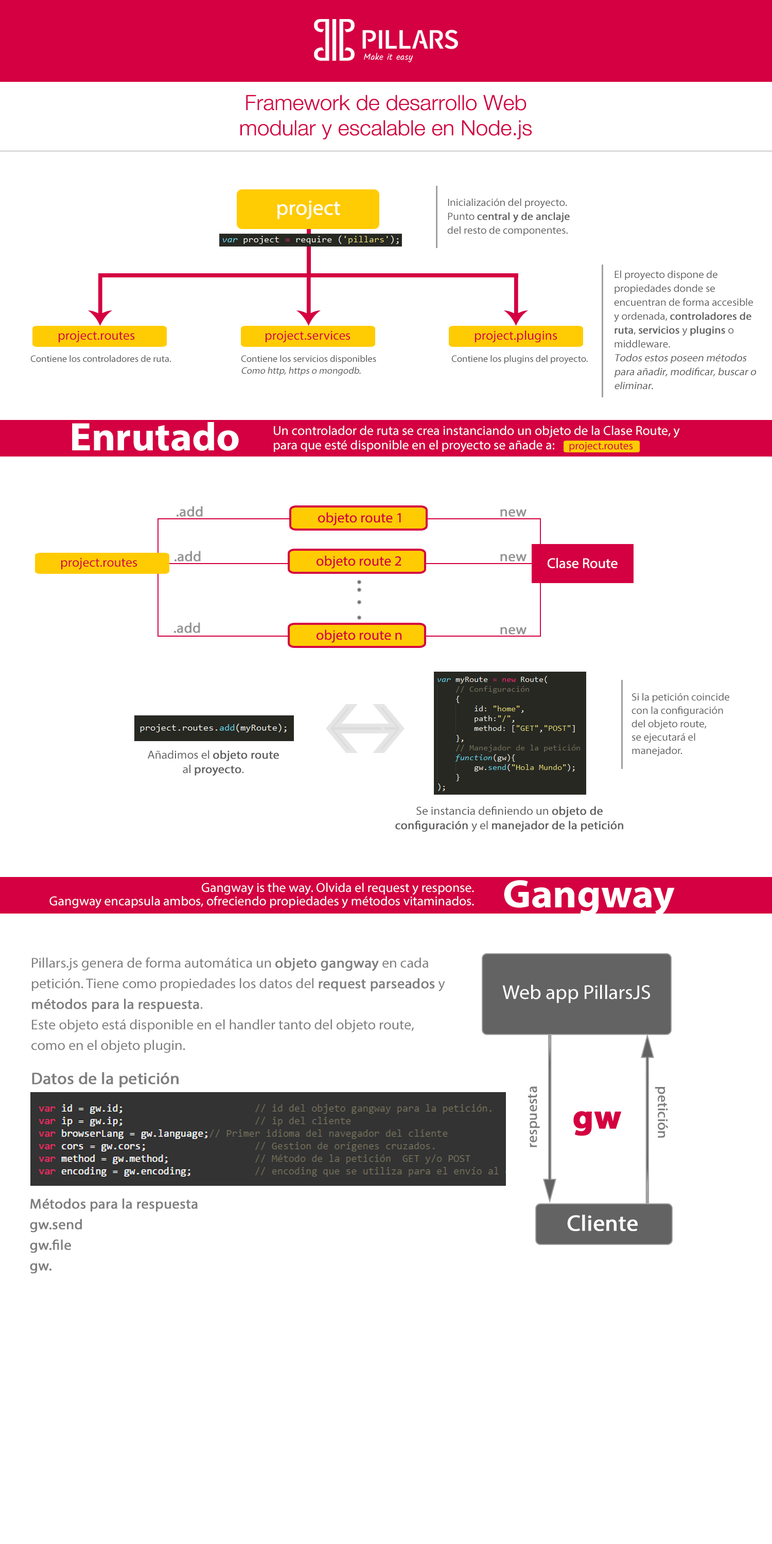
<style>
.page{position:relative;width:772px;height:1544px;background:#ffffff}
.page>*{position:absolute;margin:0}
.t1{font:21.1px/25.2px "HelveticaNeue-Light";color:#d40041;scale:1.03 1}
.t2{font:21.1px "MyriadPro-Regular";color:#ffffff;scale:1.03 1}
.t3{font:10.6px/13.9px "MyriadPro-Regular";color:#606060;scale:1.03 1}
.t4{font:12.9px/13.9px "MyriadPro-Regular";color:#606060;scale:1.03 1}
.t5{font:10.6px/13.9px "MyriadPro-Regular";color:#606060;font-weight:bold;scale:1.03 1}
.t6{font:10.6px/13.9px "MyriadPro-Regular";color:#606060;font-style:italic;scale:1.03 1}
.t7{font:12.9px "MyriadPro-Regular";color:#d40041;scale:1.03 1}
.t8{font:9.4px "MyriadPro-Regular";color:#606060;scale:1.03 1}
.t9{font:9.4px/11.8px "MyriadPro-Regular";color:#606060;scale:1.03 1}
.t10{font:9.4px/11.8px "MyriadPro-Regular";color:#606060;font-style:italic;scale:1.03 1}
.t11{font:39.9px "MyriadPro-Bold";color:#ffffff;scale:1.03 1}
.t12{font:12.9px/7.2px "MyriadPro-Regular";color:#ffffff;scale:1.03 1}
.t13{font:10.9px "MyriadPro-Regular";color:#d40041}
.t14{font:14.1px "MyriadPro-Regular";color:#949393;font-weight:bold;scale:1.03 1}
.t15{font:14.1px "MyriadPro-Regular";color:#d40041;scale:1.03 1}
.t16{font:14.1px "MyriadPro-Regular";color:#fffefe;scale:1.03 1}
.t17{font:10.6px/13.4px "MyriadPro-Regular";color:#606060;scale:1.03 1}
.t18{font:11.7px/14.4px "MyriadPro-Regular";color:#606060;font-weight:bold;scale:1.03 1}
.t19{font:11.7px/14.4px "MyriadPro-Regular";color:#606060;scale:1.03 1}
.t20{font:12.9px/13.4px "MyriadPro-Regular";color:#ffffff;scale:1.03 1}
.t21{font:14.1px/20.6px "MyriadPro-Regular";color:#7e7e7e;scale:1.03 1}
.t22{font:14.1px/20.6px "MyriadPro-Regular";color:#7e7e7e;font-weight:bold;scale:1.03 1}
.t23{font:20px "MyriadPro-Regular";color:#ffffff;scale:1.03 1}
.t24{font:16.4px "MyriadPro-Regular";color:#7e7e7e;font-weight:bold;scale:1.03 1}
.t25{font:14.1px "MyriadPro-Regular";color:#7e7e7e;font-weight:bold;scale:1.03 1}
.t26{font:34px "MyriadPro-Bold";color:#d40041;font-weight:bold;scale:1.03 1}
.t27{font:22.3px "MyriadPro-Regular";color:#ffffff;font-weight:bold;scale:1.03 1}
</style>
<div class="page">
<p class="t1" style="left:240px;top:95px;width:292px;height:45px;text-align:center">Framework de desarrollo Web <br>modular y escalable en Node.js</p>
<p class="t2" style="left:277px;top:200px;width:63px;height:19px">project</p>
<p class="t3" style="left:447px;top:198px;width:123px;height:38px"><span class="t4"><br></span>Inicialización del proyecto. <br>Punto <span class="t5">central y de anclaje</span> <br>del resto de componentes.</p>
<p class="t3" style="left:614px;top:270px;width:142px;height:120px"><span class="t4"><br></span>El proyecto dispone de <br>propiedades donde se <br>encuentran de forma accesible y ordenada, <span class="t5">controladores de ruta</span>, <span class="t5">servicios </span>y <span class="t5">plugins </span>o middleware.<br><span class="t6">Todos estos poseen métodos<br>para añadir, modificar, buscar o eliminar.</span></p>
<p class="t7" style="left:59px;top:331px;width:76px;height:12px">project.routes</p>
<p class="t7" style="left:266px;top:331px;width:85px;height:12px">project.services</p>
<p class="t7" style="left:475px;top:330px;width:82px;height:13px">project.plugins</p>
<p class="t8" style="left:30px;top:355px;width:141px;height:7px">Contiene los controladores de ruta.</p>
<p class="t9" style="left:241px;top:355px;width:135px;height:21px">Contiene los servicios disponibles<br><span class="t10">Como http, https o mongodb.</span></p>
<p class="t8" style="left:451px;top:355px;width:137px;height:9px">Contiene los plugins del proyecto.</p>
<p class="t11" style="left:72px;top:422px;width:167px;height:29px">Enrutado</p>
<p class="t12" style="left:274px;top:426px;width:406px;height:26px">Un controlador de ruta se crea instanciando un objeto de la Clase Route, y<br><br>para que esté disponible en el proyecto se añade a:</p>
<p class="t13" style="left:569px;top:442px;width:64px;height:10px">project.routes</p>
<p class="t14" style="left:177px;top:506px;width:26px;height:11px">.add</p>
<p class="t14" style="left:500px;top:509px;width:27px;height:8px">new</p>
<p class="t15" style="left:318px;top:512px;width:83px;height:14px">objeto route 1</p>
<p class="t14" style="left:175px;top:551px;width:26px;height:11px">.add</p>
<p class="t15" style="left:317px;top:555px;width:85px;height:14px">objeto route 2</p>
<p class="t14" style="left:500px;top:554px;width:27px;height:8px">new</p>
<p class="t7" style="left:61px;top:558px;width:76px;height:12px">project.routes</p>
<p class="t16" style="left:548px;top:558px;width:70px;height:10px">Clase Route</p>
<p class="t14" style="left:174px;top:622px;width:26px;height:11px">.add</p>
<p class="t15" style="left:317px;top:630px;width:85px;height:13px">objeto route n</p>
<p class="t14" style="left:500px;top:627px;width:27px;height:8px">new</p>
<p class="t17" style="left:632px;top:693px;width:97px;height:64px">Si la petición coincide con la configuración del objeto route, <br>se ejecutará el <br>manejador.</p>
<p class="t18" style="left:148px;top:750px;width:131px;height:26px;text-align:center"><span class="t19">Añadimos el </span>objeto route <span class="t19">al </span>proyecto<span class="t19">.</span></p>
<p class="t19" style="left:395px;top:806px;width:228px;height:26px;text-align:center">Se instancia definiendo un <span class="t18">objeto de <br>configuración </span>y el <span class="t18">manejador de la petición</span></p>
<p class="t11" style="left:504px;top:880px;width:171px;height:36px">Gangway</p>
<p class="t20" style="left:49px;top:883px;width:425px;height:26px;text-align:right">Gangway is the way. Olvida el request y response. <br>Gangway encapsula ambos, ofreciendo propiedades y métodos vitaminados.</p>
<p class="t21" style="left:31px;top:957px;width:414px;height:96px">Pillars.js genera de forma automática un <span class="t22">objeto gangway</span> en cada petición. Tiene como propiedades los datos del <span class="t22">request parseados</span> y <span class="t22">métodos para la respuesta</span>.<br>Este objeto está disponible en el handler tanto del objeto route, como en el objeto plugin.</p>
<p class="t23" style="left:502px;top:985px;width:148px;height:18px">Web app PillarsJS</p>
<p class="t24" style="left:32px;top:1072px;width:147px;height:16px">Datos de la petición</p>
<p class="t25" style="left:528px;top:1087px;width:12px;height:60px;rotate:-90deg">respuesta</p>
<p class="t25" style="left:655px;top:1087px;width:13px;height:51px;rotate:90deg">petición</p>
<p class="t26" style="left:573px;top:1111px;width:48px;height:25px">gw</p>
<p class="t22" style="left:30px;top:1198px;width:168px;height:76px">Métodos para la respuesta<br>gw.send<br>gw.file<br>gw.</p>
<p class="t27" style="left:567px;top:1215px;width:71px;height:16px">Cliente</p>
</div>
